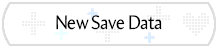
<style>
.page{position:relative;width:218px;height:48px;background:#ffffff}
.page>*{position:absolute;margin:0}
.t1{font:19.8px "Amira-Roman";letter-spacing:-0.02em;color:#000000;scale:0.91 1}
</style>
<div class="page">
<p class="t1" style="left:56px;top:15px;width:106px;height:15px">New Save Data</p>
</div>
